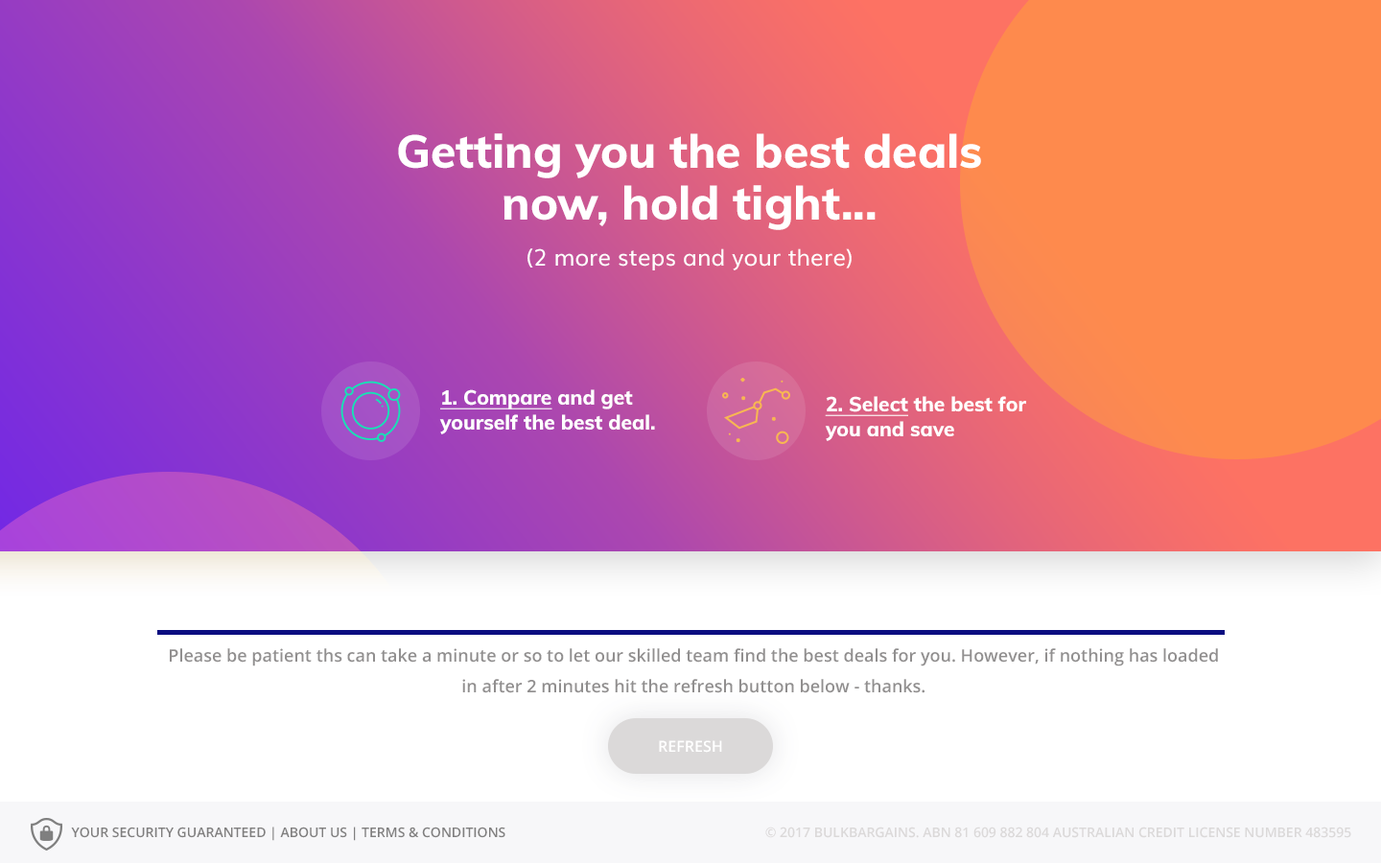
<style>
.page{position:relative;width:1381px;height:863px;background:#ffffff}
.page>*{position:absolute;margin:0}
.t1{font:46.2px/51.1px "Muli-ExtraBold";color:#ffffff}
.t2{font:23px/46.2px "Muli";color:#ffffff}
.t3{font:20.1px/24.9px "Muli-ExtraBold";color:#ffffff}
.t4{font:20.1px/24.9px "Muli-ExtraBold";color:#ffffff;text-decoration:underline}
.t5{font:17.3px/25px "OpenSans-Semibold";color:#918f8f}
.t6{font:15.4px "OpenSans-Semibold";color:#ffffff;text-transform:uppercase}
.t7{font:13.4px "OpenSans-Semibold";color:#807f7f;text-transform:uppercase}
.t8{font:13.4px "OpenSans-Semibold";color:#dbd9d9;text-transform:uppercase}
</style>
<div class="page">
<p class="t1" style="left:398px;top:133px;width:583px;height:137px;text-align:center">Getting you the best deals now, hold tight...<br><span class="t2">(2 more steps and your there)</span></p>
<p class="t3" style="left:439px;top:389px;width:216px;height:46px"><span class="t4">1. Compare</span> and get yourself the best deal.</p>
<p class="t3" style="left:825px;top:396px;width:201px;height:45px"><span class="t4">2. Select</span> the best for you and save</p>
<p class="t5" style="left:170px;top:648px;width:1048px;height:46px;text-align:center">Please be patient ths can take a minute or so to let our skilled team find the best deals for you. However, if nothing has loaded <br>in after 2 minutes hit the refresh button below - thanks.</p>
<p class="t6" style="left:659px;top:741px;width:63px;height:12px">refresh</p>
<p class="t7" style="left:71px;top:827px;width:435px;height:14px">Your security guaranteed | about us | Terms &amp; Conditions</p>
<p class="t8" style="left:765px;top:827px;width:587px;height:11px">© 2017 Bulkbargains. ABN 81 609 882 804 Australian Credit License Number 483595</p>
</div>
